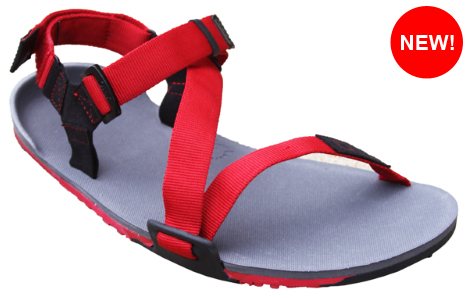
<style>
.page{position:relative;width:470px;height:298px;background:#ffffff}
.page>*{position:absolute;margin:0}
.t1{font:21.1px "Arial-BoldMT";color:#ffffff}
</style>
<div class="page">
<p class="t1" style="left:401px;top:35px;width:53px;height:15px">NEW!</p>
</div>
